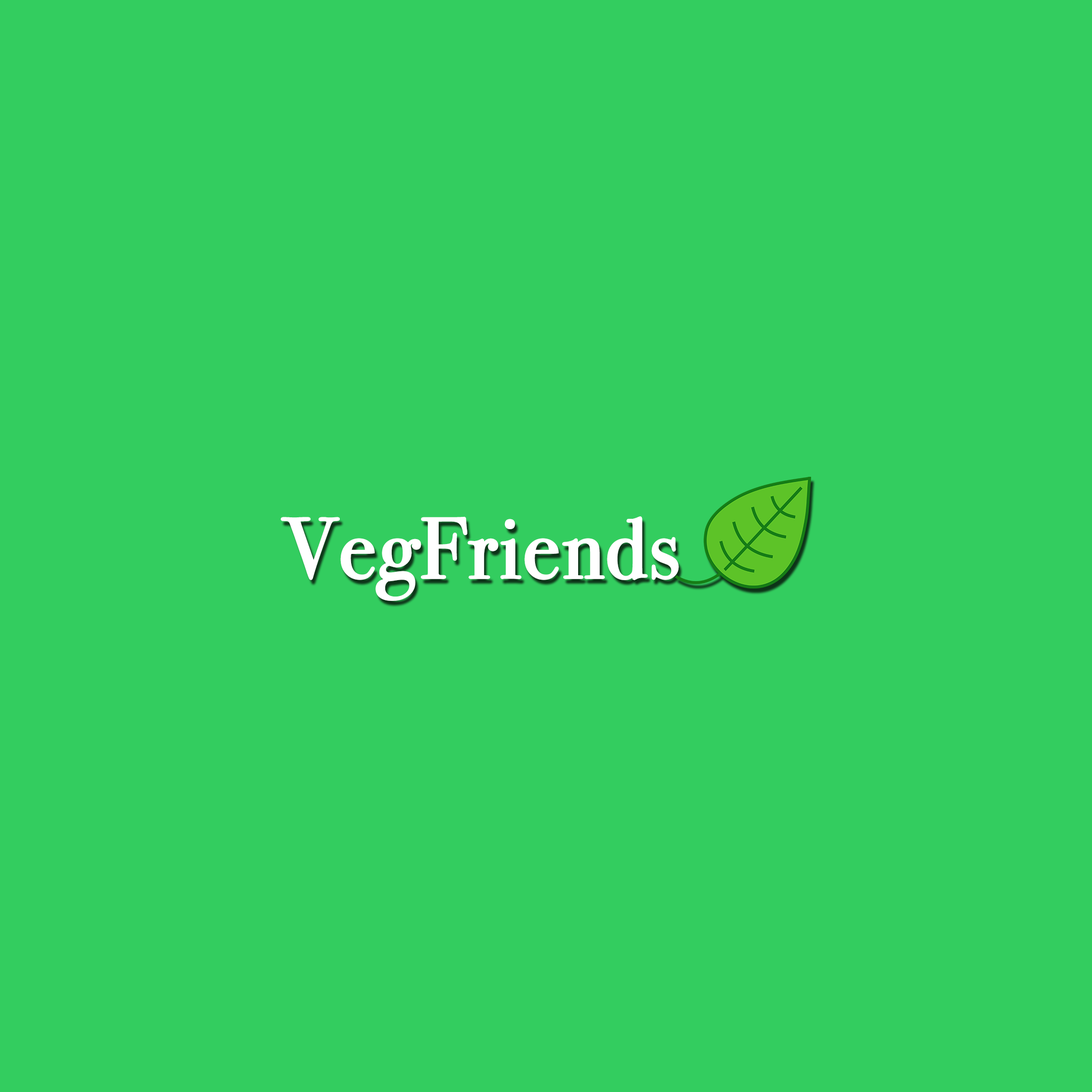
<style>
.page{position:relative;width:1092px;height:1092px;background:#33cd5f}
.page>*{position:absolute;margin:0}
.t1{font:85.1px "BodoniSvtyTwoITCTT-Book";color:#ffffff;font-weight:bold}
</style>
<div class="page">
<p class="t1" style="left:280px;top:516px;width:399px;height:85px">VegFriends</p>
</div>
